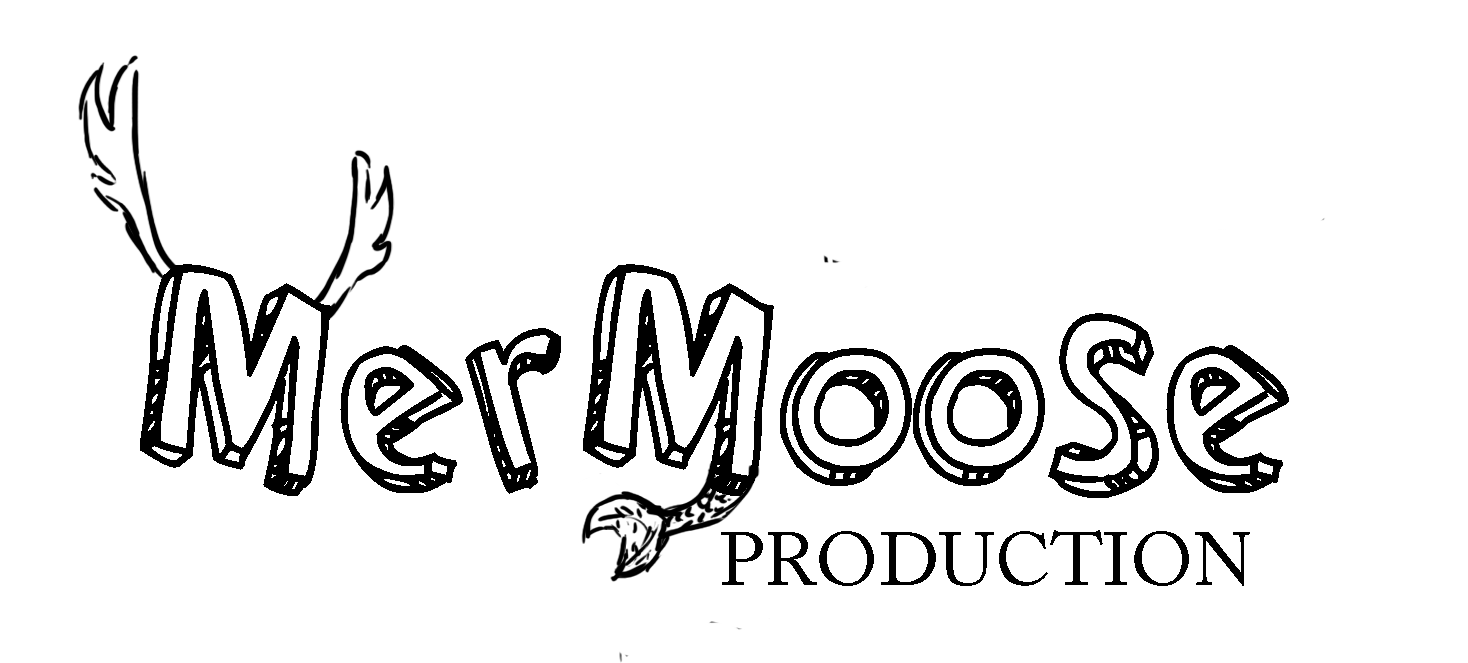
<style>
.page{position:relative;width:1468px;height:663px;background:#ffffff}
.page>*{position:absolute;margin:0}
.t1{font:300px "CartoonRelief";color:#000000}
.t2{font:75px "ACaslonPro-Regular";color:#000000}
</style>
<div class="page">
<p class="t1" style="left:140px;top:264px;width:1149px;height:234px">MerMoose</p>
<p class="t2" style="left:721px;top:530px;width:529px;height:56px">PRODUCTION</p>
</div>
